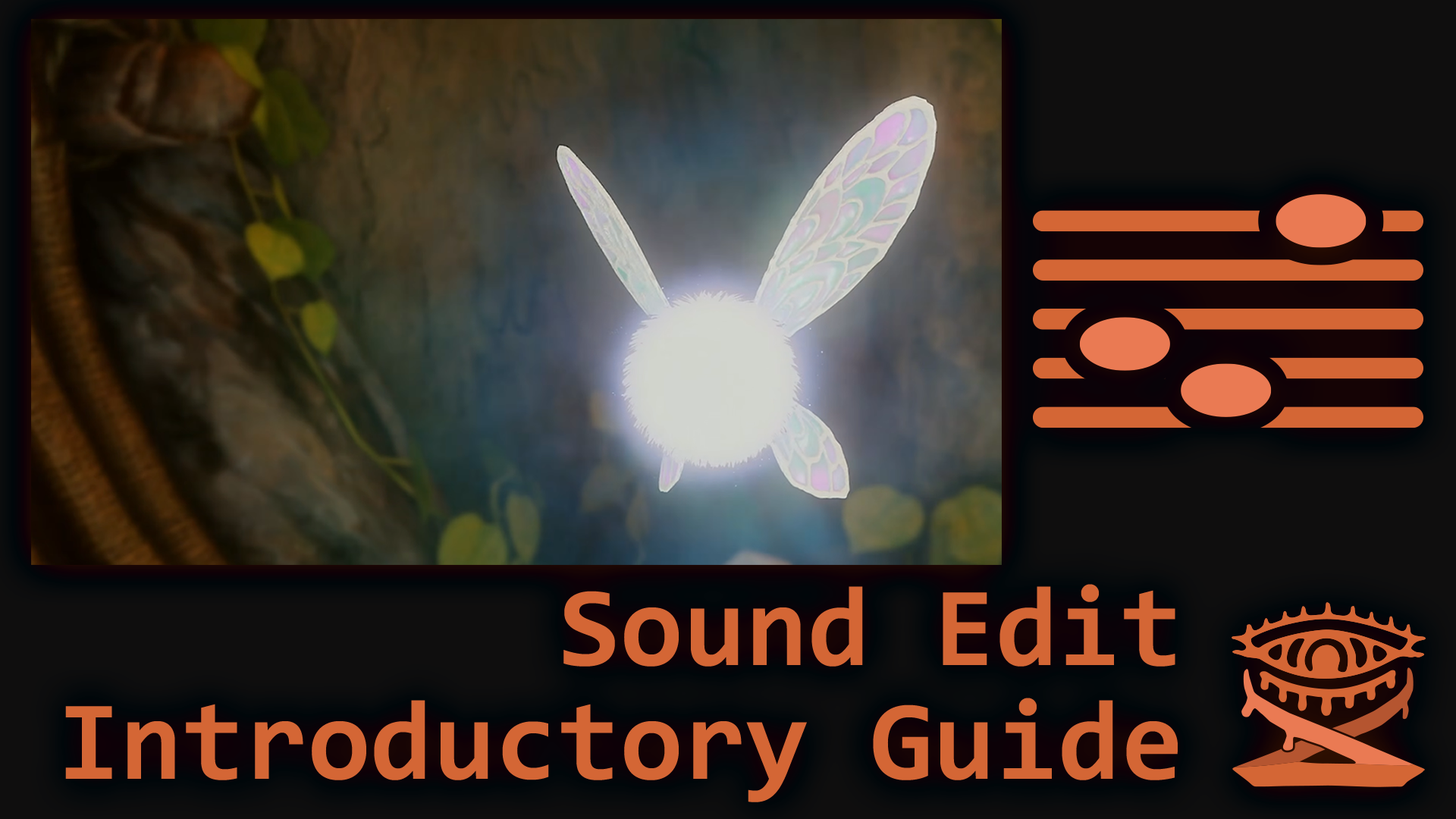
<style>
.page{position:relative;width:1456px;height:819px}
.page>*{position:absolute;margin:0}
.t1{font:113.7px/113.7px "Consolas-Bold";color:#d46635}
</style>
<div class="page">
<p class="t1" style="left:65px;top:584px;width:1113px;height:218px;text-align:right">Sound Edit<br>Introductory Guide</p>
</div>
